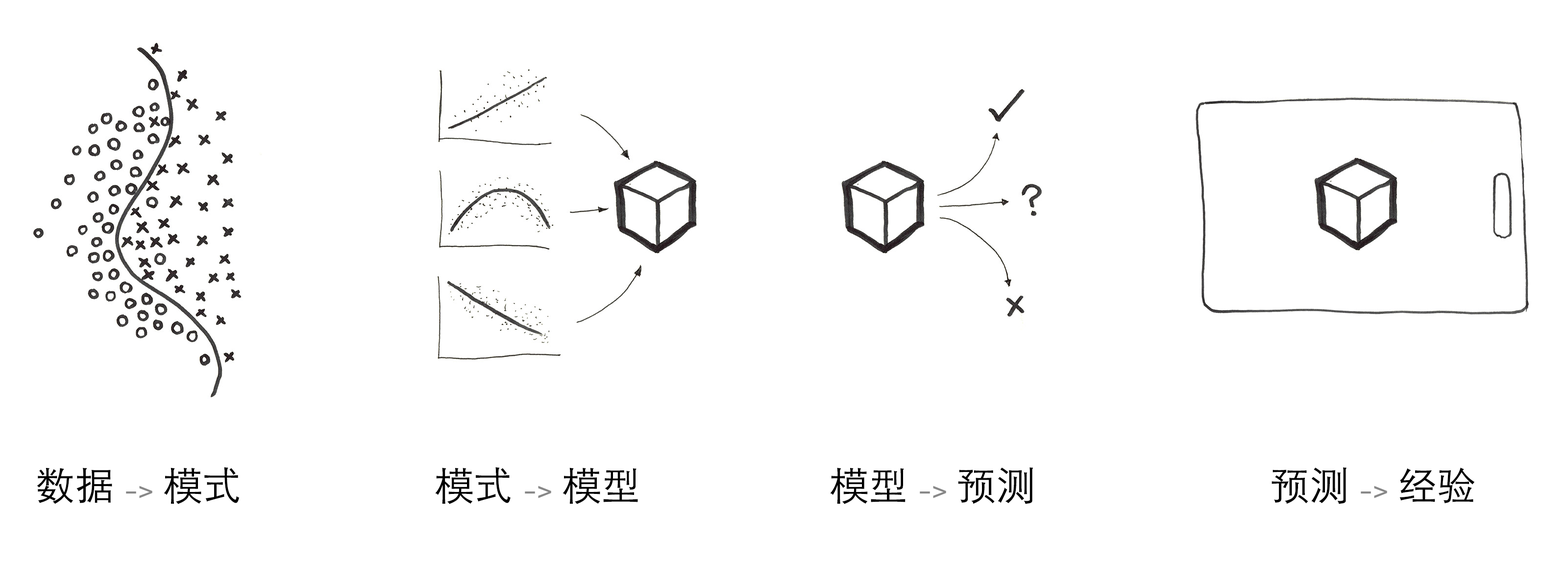
<style>
.page{position:relative;width:1568px;height:588px;background:#ffffff}
.page>*{position:absolute;margin:0}
.t1{font:39.2px "STHeitiSC-Light";color:#000000}
.t2{font:24.5px "Hack";color:#888888}
</style>
<div class="page">
<p class="t1" style="left:37px;top:467px;width:202px;height:37px">数据 <span class="t2">-&gt;</span> 模式</p>
<p class="t1" style="left:435px;top:467px;width:203px;height:37px">模式 <span class="t2">-&gt;</span> 模型</p>
<p class="t1" style="left:830px;top:467px;width:203px;height:37px">模型 <span class="t2">-&gt;</span> 预测</p>
<p class="t1" style="left:1272px;top:467px;width:202px;height:37px">预测 <span class="t2">-&gt;</span> 经验</p>
</div>
